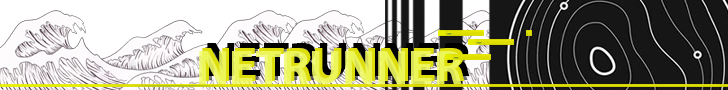
<style>
.page{position:relative;width:728px;height:90px;background:#ffffff}
.page>*{position:absolute;margin:0}
.t1{font:48px "MyriadPro-Bold";color:#f0fa61}
.t2{font:48px "MyriadPro-Bold"}
</style>
<div class="page">
<p class="t1" style="left:199px;top:51px;width:263px;height:33px;opacity:0.85">NETRUNNER</p>
<p class="t2" style="left:202px;top:48px;width:263px;height:33px">NETRUNNER</p>
<p class="t2" style="left:205px;top:47px;width:263px;height:33px">NETRUNNER</p>
<p class="t2" style="left:207px;top:43px;width:263px;height:33px">NETRUNNER</p>
</div>
